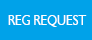
<style>
.page{position:relative;width:92px;height:40px;background:#00a2e9}
.page>*{position:absolute;margin:0}
.t1{font:13.9px "Humanist521BT-Roman";color:#ffffff;scale:0.89 1}
</style>
<div class="page">
<p class="t1" style="left:8px;top:15px;width:79px;height:12px">REG REQUEST</p>
</div>
